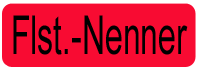
<style>
.page{position:relative;width:200px;height:70px;background:#f80b32}
.page>*{position:absolute;margin:0}
.t1{font:53.8px "ArialMT";color:#000000;scale:0.6 1}
</style>
<div class="page">
<p class="t1" style="left:13px;top:15px;width:175px;height:40px">Flst.-Nenner</p>
</div>
